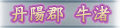
<style>
.page{position:relative;width:120px;height:28px}
.page>*{position:absolute;margin:0}
.t1{font:18px "FZBWKSFW--GB1-0"}
</style>
<div class="page">
<p class="t1" style="left:11px;top:5px;width:99px;height:18px">丹阳郡  牛渚</p>
</div>
